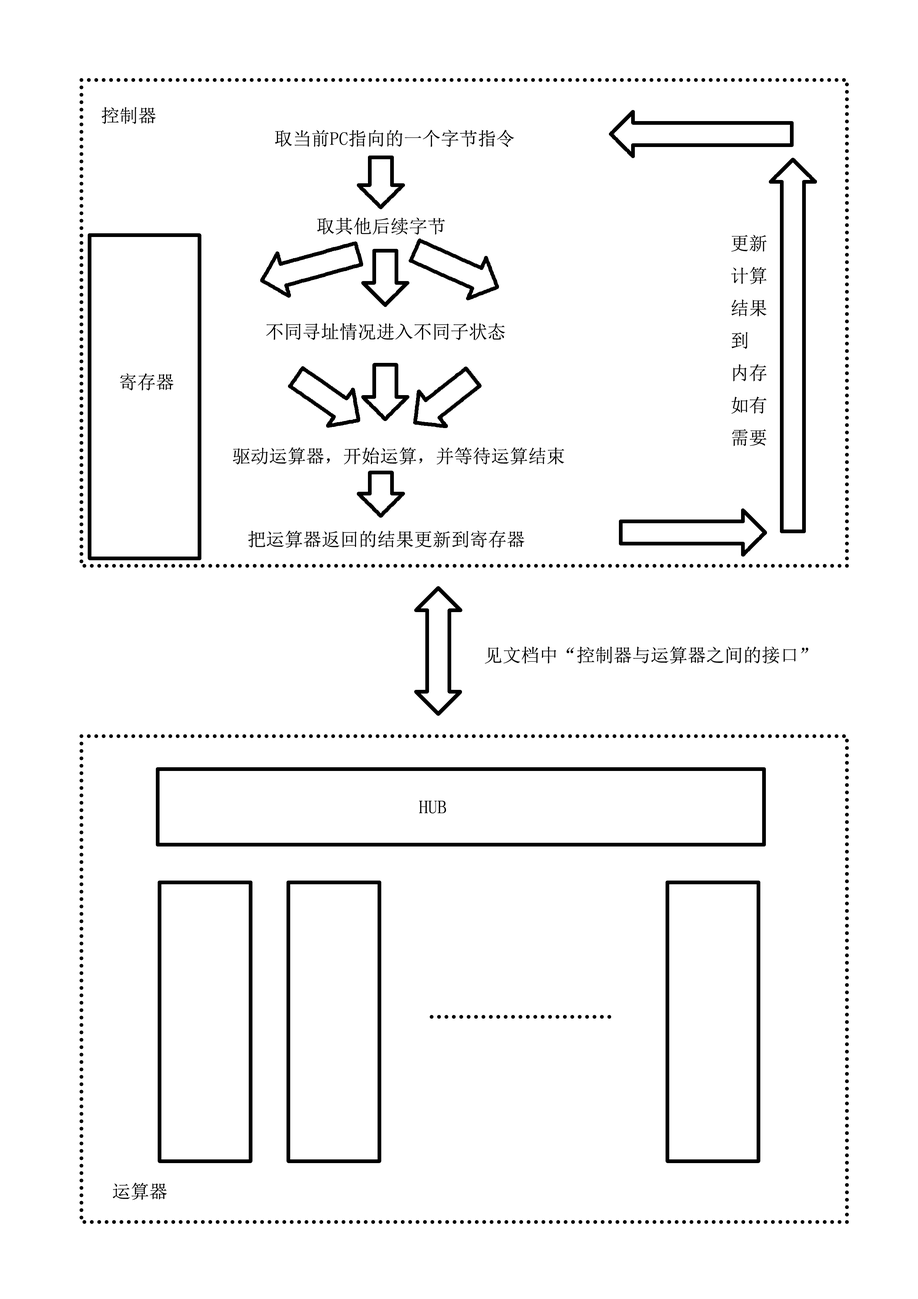
<style>
.page{position:relative;width:918px;height:1299px;background:#ffffff}
.page>*{position:absolute;margin:0}
.t1{font:18.5px "SimSun";color:#000000}
</style>
<div class="page">
<p class="t1" style="left:101px;top:107px;width:55px;height:17px">控制器</p>
<p class="t1" style="left:275px;top:130px;width:239px;height:17px">取当前PC指向的一个字节指令</p>
<p class="t1" style="left:317px;top:217px;width:128px;height:18px">取其他后续字节</p>
<p class="t1" style="left:731px;top:235px;width:36px;height:211px">更新<br>计算<br>结果<br>到<br>内存<br>如有<br>需要</p>
<p class="t1" style="left:266px;top:323px;width:239px;height:17px">不同寻址情况进入不同子状态</p>
<p class="t1" style="left:120px;top:373px;width:54px;height:18px">寄存器</p>
<p class="t1" style="left:233px;top:447px;width:332px;height:18px">驱动运算器，开始运算，并等待运算结束</p>
<p class="t1" style="left:248px;top:530px;width:277px;height:18px">把运算器返回的结果更新到寄存器</p>
<p class="t1" style="left:485px;top:646px;width:324px;height:18px">见文档中“控制器与运算器之间的接口”</p>
<p class="t1" style="left:419px;top:800px;width:27px;height:13px">HUB</p>
<p class="t1" style="left:113px;top:1182px;width:54px;height:18px">运算器</p>
</div>
